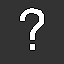
<style>
.page{position:relative;width:64px;height:64px;background:#333333}
.page>*{position:absolute;margin:0}
.t1{font:58.9px "ArialNarrow";color:#ffffff}
</style>
<div class="page">
<p class="t1" style="left:21px;top:8px;width:23px;height:42px">?</p>
</div>
